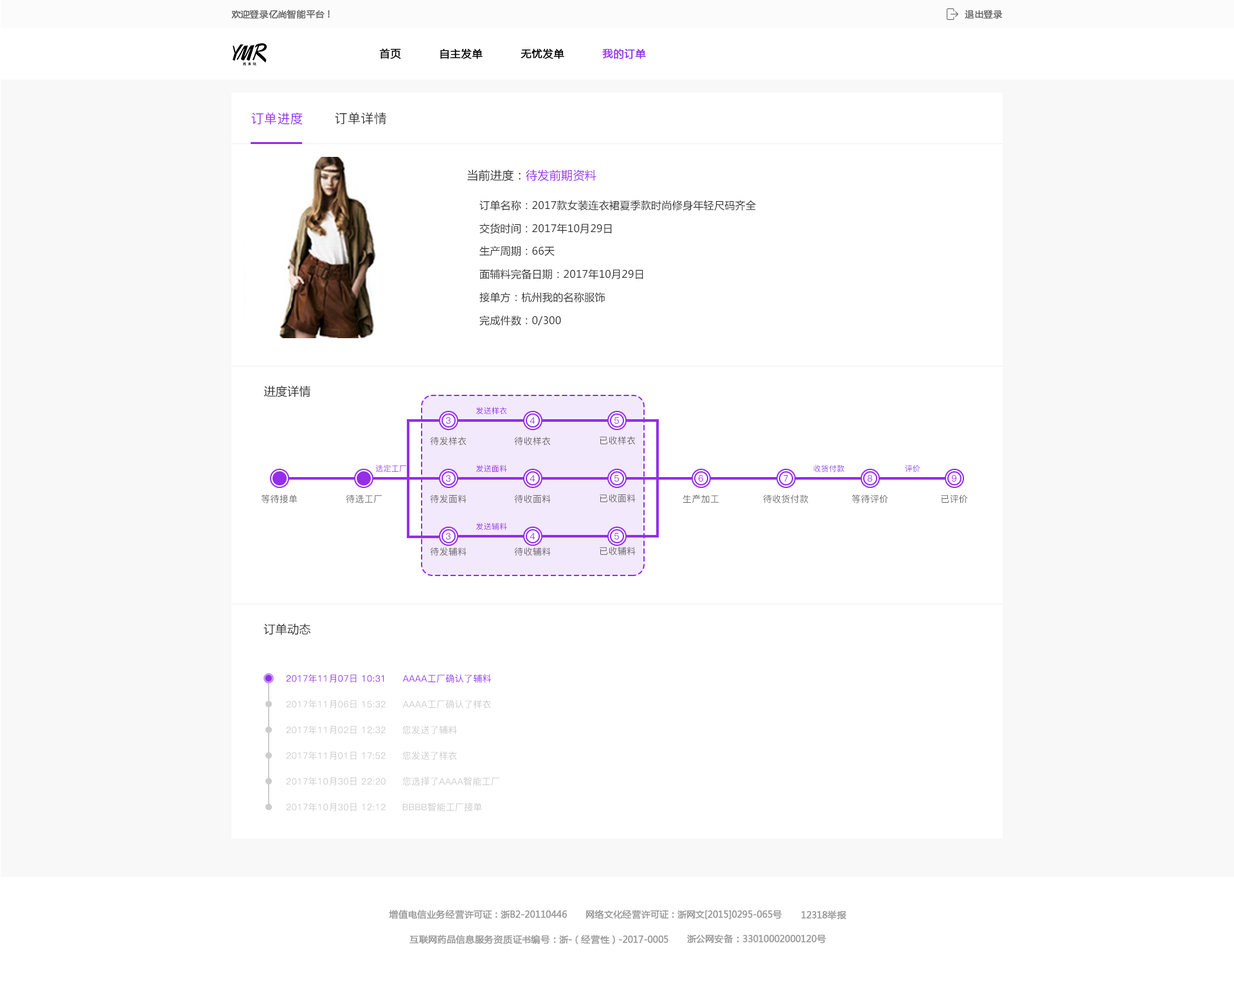
<style>
.page{position:relative;width:1234px;height:994px;background:#ffffff}
.page>*{position:absolute;margin:0}
.t1{font:9px "MicrosoftYaHei";color:#666666;font-weight:bold}
.t2{font:10.3px "MicrosoftYaHei";color:#000000;font-weight:bold}
.t3{font:10.3px "MicrosoftYaHei";color:#942eea;font-weight:bold}
.t4{font:12.9px "PingFang-SC-Medium";letter-spacing:0.02em;color:#942eea}
.t5{font:12.9px "PingFang-SC-Medium";letter-spacing:0.02em;color:#333333}
.t6{font:11.6px "MicrosoftYaHei";letter-spacing:0.02em;color:#942eea}
.t7{font:11.6px "MicrosoftYaHei";letter-spacing:0.02em;color:#333333}
.t8{font:10.3px "MicrosoftYaHei";letter-spacing:0.02em;color:#333333}
.t9{font:7.7px "PingFang-SC-Medium";letter-spacing:0.02em;color:#942eea}
.t10{font:9px "PingFang-SC-Medium";letter-spacing:0.02em;color:#942eea}
.t11{font:9px "PingFang-SC-Medium";letter-spacing:0.02em}
.t12{font:9px "PingFang-SC-Medium";letter-spacing:0.02em;color:#666666}
.t13{font:7.7px "PingFang-SC-Medium";letter-spacing:0.02em}
.t14{font:9px "PingFang-SC-Medium";letter-spacing:0.02em;color:#cccccc}
.t15{font:9px "MicrosoftYaHei";color:#999999;font-weight:bold}
</style>
<div class="page">
<p class="t1" style="left:231px;top:10px;width:99px;height:9px">欢迎登录亿尚智能平台！</p>
<p class="t1" style="left:965px;top:10px;width:38px;height:9px">退出登录</p>
<p class="t2" style="left:379px;top:48px;width:22px;height:11px">首页</p>
<p class="t2" style="left:440px;top:49px;width:43px;height:10px">自主发单</p>
<p class="t2" style="left:521px;top:49px;width:43px;height:10px">无忧发单</p>
<p class="t3" style="left:602px;top:49px;width:44px;height:10px">我的订单</p>
<p class="t4" style="left:251px;top:113px;width:52px;height:12px">订单进度</p>
<p class="t5" style="left:335px;top:112px;width:51px;height:13px">订单详情</p>
<p class="t6" style="left:467px;top:169px;width:130px;height:12px"><span class="t7">当前进度：</span>待发前期资料</p>
<p class="t8" style="left:480px;top:200px;width:276px;height:11px">订单名称：2017款女装连衣裙夏季款时尚修身年轻尺码齐全</p>
<p class="t8" style="left:480px;top:223px;width:132px;height:11px">交货时间：2017年10月29日</p>
<p class="t8" style="left:480px;top:246px;width:75px;height:10px">生产周期：66天</p>
<p class="t8" style="left:480px;top:269px;width:164px;height:11px">面辅料完备日期：2017年10月29日</p>
<p class="t8" style="left:480px;top:292px;width:126px;height:11px">接单方：杭州我的名称服饰</p>
<p class="t8" style="left:480px;top:315px;width:81px;height:11px">完成件数：0/300</p>
<p class="t7" style="left:264px;top:385px;width:46px;height:12px">进度详情</p>
<p class="t9" style="left:476px;top:407px;width:31px;height:8px">发送样衣</p>
<p class="t10" style="left:446px;top:417px;width:5px;height:7px">3</p>
<p class="t11" style="left:530px;top:417px;width:6px;height:7px">4</p>
<p class="t10" style="left:615px;top:417px;width:4px;height:7px">5</p>
<p class="t12" style="left:430px;top:437px;width:37px;height:9px">待发样衣</p>
<p class="t12" style="left:514px;top:437px;width:37px;height:9px">待收样衣</p>
<p class="t12" style="left:600px;top:436px;width:36px;height:9px">已收样衣</p>
<p class="t13" style="left:376px;top:465px;width:30px;height:8px">选定工厂</p>
<p class="t9" style="left:476px;top:465px;width:31px;height:8px">发送面料</p>
<p class="t9" style="left:814px;top:465px;width:31px;height:8px">收货付款</p>
<p class="t9" style="left:905px;top:465px;width:16px;height:8px">评价</p>
<p class="t10" style="left:446px;top:474px;width:5px;height:8px">3</p>
<p class="t11" style="left:530px;top:475px;width:6px;height:7px">4</p>
<p class="t10" style="left:615px;top:475px;width:4px;height:7px">5</p>
<p class="t10" style="left:699px;top:474px;width:4px;height:8px">6</p>
<p class="t10" style="left:784px;top:475px;width:4px;height:7px">7</p>
<p class="t10" style="left:867px;top:474px;width:5px;height:8px">8</p>
<p class="t10" style="left:952px;top:474px;width:5px;height:8px">9</p>
<p class="t12" style="left:262px;top:494px;width:36px;height:9px">等待接单</p>
<p class="t12" style="left:346px;top:494px;width:36px;height:9px">待选工厂</p>
<p class="t12" style="left:430px;top:494px;width:37px;height:9px">待发面料</p>
<p class="t12" style="left:514px;top:494px;width:37px;height:9px">待收面料</p>
<p class="t12" style="left:600px;top:494px;width:36px;height:9px">已收面料</p>
<p class="t12" style="left:683px;top:494px;width:36px;height:9px">生产加工</p>
<p class="t12" style="left:763px;top:494px;width:46px;height:9px">待收货付款</p>
<p class="t12" style="left:852px;top:494px;width:36px;height:9px">等待评价</p>
<p class="t12" style="left:941px;top:494px;width:27px;height:9px">已评价</p>
<p class="t10" style="left:446px;top:532px;width:5px;height:8px">3</p>
<p class="t9" style="left:476px;top:523px;width:31px;height:7px">发送辅料</p>
<p class="t11" style="left:530px;top:533px;width:6px;height:6px">4</p>
<p class="t10" style="left:615px;top:533px;width:4px;height:7px">5</p>
<p class="t12" style="left:430px;top:547px;width:37px;height:9px">待发辅料</p>
<p class="t12" style="left:514px;top:547px;width:37px;height:9px">待收辅料</p>
<p class="t12" style="left:600px;top:546px;width:36px;height:9px">已收辅料</p>
<p class="t7" style="left:264px;top:624px;width:47px;height:11px">订单动态</p>
<p class="t10" style="left:286px;top:674px;width:98px;height:9px">2017年11月07日 10:31</p>
<p class="t10" style="left:402px;top:674px;width:89px;height:9px">AAAA工厂确认了辅料</p>
<p class="t14" style="left:286px;top:699px;width:100px;height:9px">2017年11月06日 15:32</p>
<p class="t14" style="left:402px;top:699px;width:89px;height:9px">AAAA工厂确认了样衣</p>
<p class="t14" style="left:286px;top:725px;width:100px;height:9px">2017年11月02日 12:32</p>
<p class="t14" style="left:402px;top:725px;width:55px;height:9px">您发送了辅料</p>
<p class="t14" style="left:286px;top:751px;width:100px;height:9px">2017年11月01日 17:52</p>
<p class="t14" style="left:402px;top:751px;width:55px;height:9px">您发送了样衣</p>
<p class="t14" style="left:286px;top:777px;width:100px;height:9px">2017年10月30日 22:20</p>
<p class="t14" style="left:402px;top:777px;width:98px;height:9px">您选择了AAAA智能工厂</p>
<p class="t14" style="left:286px;top:802px;width:100px;height:9px">2017年10月30日 12:12</p>
<p class="t14" style="left:402px;top:802px;width:80px;height:9px">BBBB智能工厂接单</p>
<p class="t15" style="left:389px;top:910px;width:179px;height:9px">增值电信业务经营许可证：浙B2-20110446</p>
<p class="t15" style="left:586px;top:910px;width:196px;height:9px">网络文化经营许可证：浙网文[2015]0295-065号</p>
<p class="t15" style="left:802px;top:910px;width:45px;height:10px">12318举报</p>
<p class="t15" style="left:410px;top:935px;width:259px;height:9px">互联网药品信息服务资质证书编号：浙-（经营性）-2017-0005</p>
<p class="t15" style="left:687px;top:934px;width:140px;height:9px">浙公网安备：33010002000120号</p>
</div>
